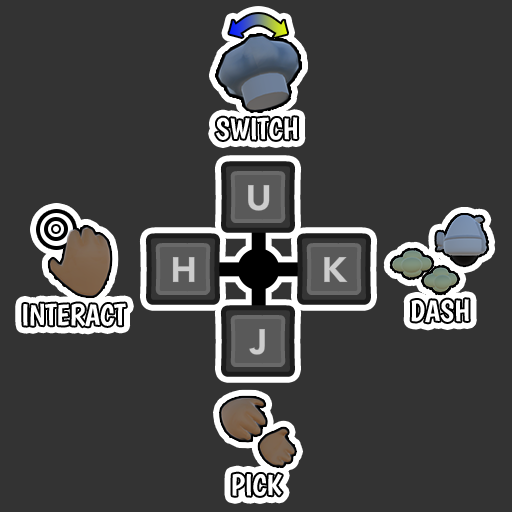
<style>
.page{position:relative;width:512px;height:512px;background:#333333}
.page>*{position:absolute;margin:0}
.t1{font:30px "Boogaloo-Regular";letter-spacing:-0.01em;color:#ffffff}
</style>
<div class="page">
<p class="t1" style="left:216px;top:117px;width:82px;height:23px">SWITCH</p>
<p class="t1" style="left:23px;top:303px;width:103px;height:24px">INTERACT</p>
<p class="t1" style="left:411px;top:299px;width:58px;height:24px">DASH</p>
<p class="t1" style="left:232px;top:473px;width:50px;height:23px">PICK</p>
</div>
